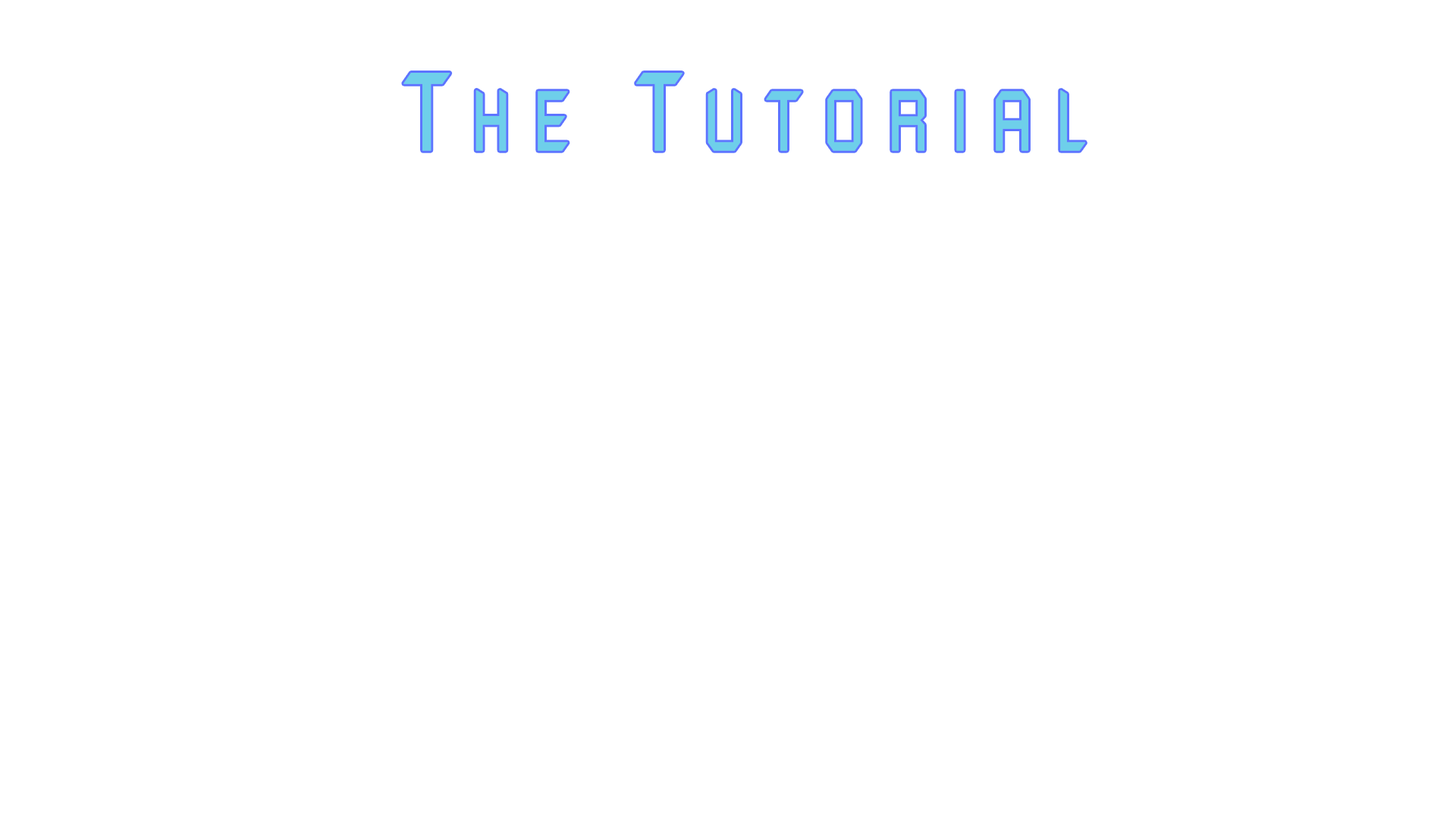
<style>
.page{position:relative;width:1456px;height:819px;background:#ffffff}
.page>*{position:absolute;margin:0}
.t1{font:109.3px "Futured";letter-spacing:0.285em;color:#6ecfea;font-weight:bold;scale:0.7 1}
</style>
<div class="page">
<p class="t1" style="left:403px;top:73px;width:682px;height:78px">The Tutorial</p>
</div>
